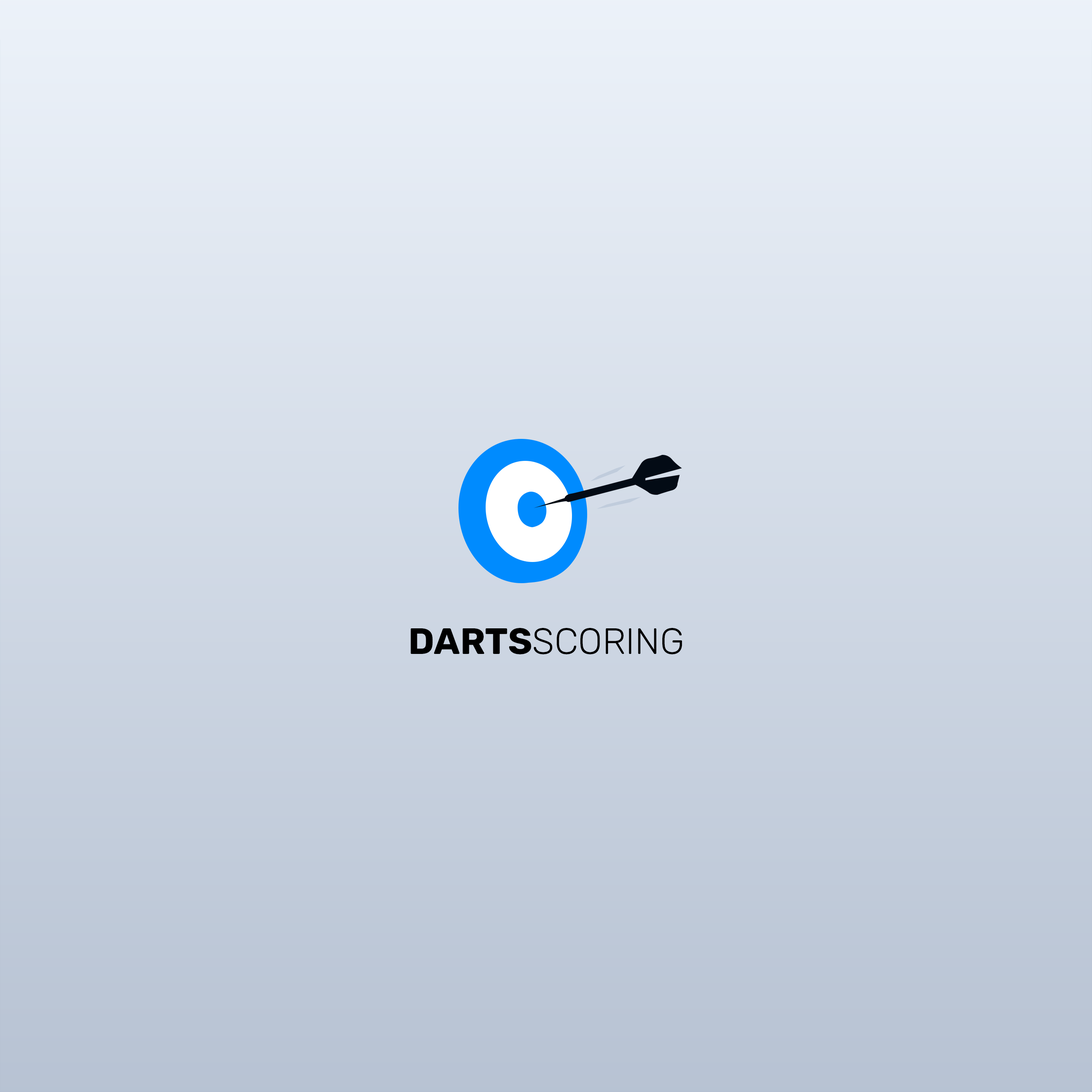
<style>
.page{position:relative;width:1092px;height:1092px}
.page>*{position:absolute;margin:0}
.t1{font:36.6px "Rubik-Light";color:#000000}
.t2{font:36.6px "Rubik-Bold";color:#000000}
</style>
<div class="page">
<p class="t1" style="left:410px;top:628px;width:272px;height:26px"><span class="t2">DARTS</span>SCORING</p>
</div>
